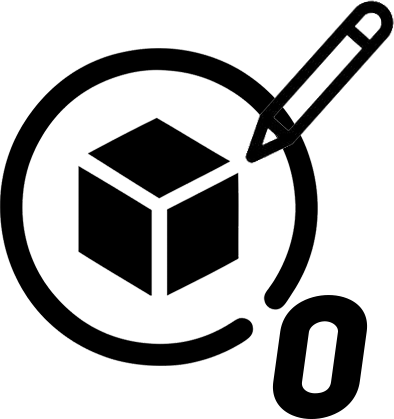
<style>
.page{position:relative;width:394px;height:419px;background:#ffffff}
.page>*{position:absolute;margin:0}
.t1{font:168.9px "UniSansHeavyCapsItalic";color:#000000}
</style>
<div class="page">
<p class="t1" style="left:272px;top:295px;width:96px;height:125px">0</p>
</div>
